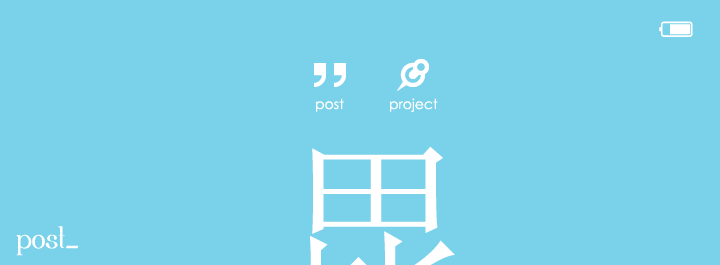
<style>
.page{position:relative;width:720px;height:265px;background:#7ad2ea}
.page>*{position:absolute;margin:0}
.t1{font:14px "CenturyGothic";color:#ffffff}
.t2{font:36px "Fortunatus";color:#ffffff}
</style>
<div class="page">
<p class="t1" style="left:316px;top:98px;width:28px;height:14px">post</p>
<p class="t1" style="left:390px;top:98px;width:48px;height:14px">project</p>
<p class="t2" style="left:16px;top:226px;width:63px;height:30px">post_</p>
</div>
